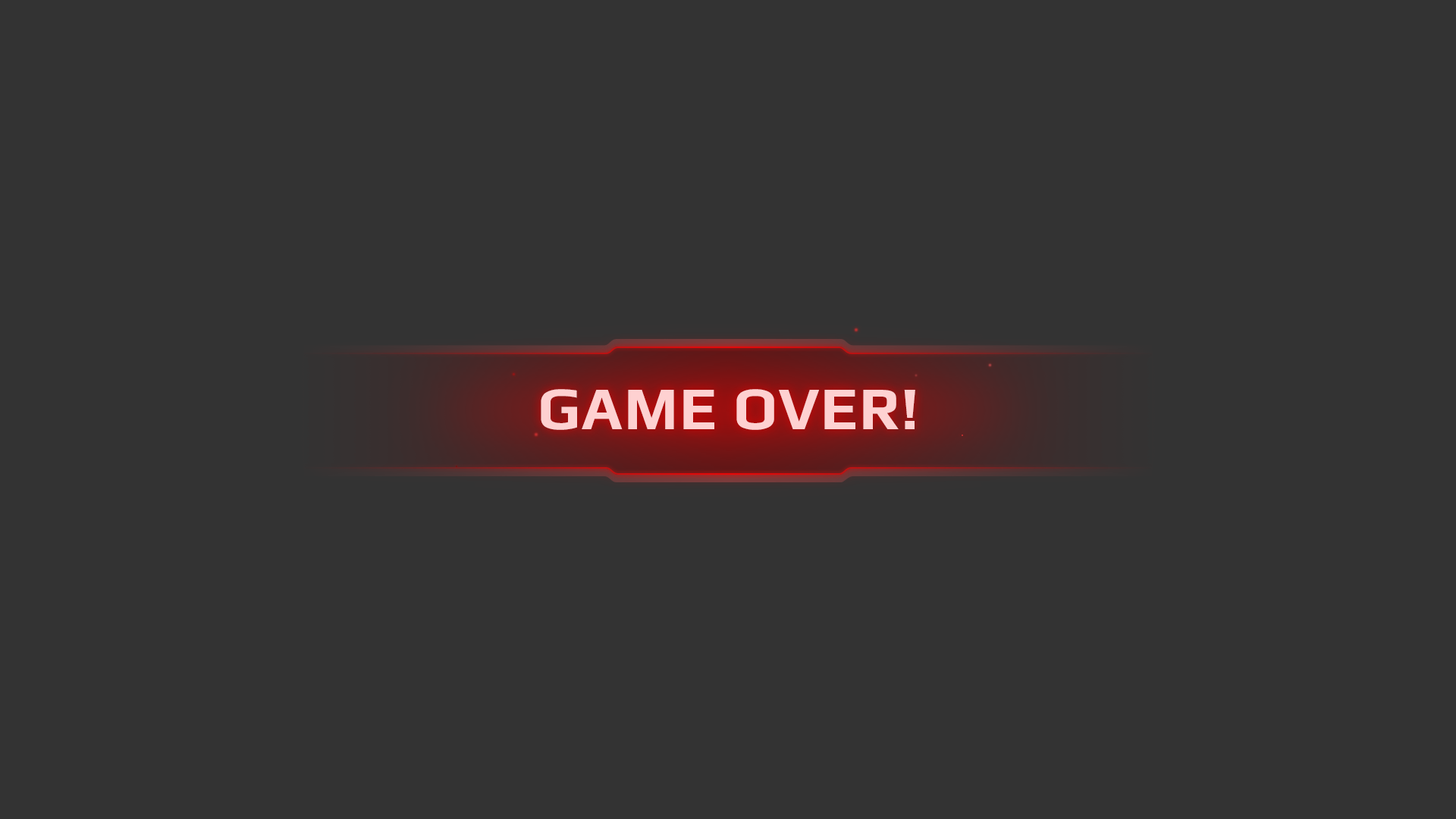
<style>
.page{position:relative;width:1456px;height:819px;background:#333333}
.page>*{position:absolute;margin:0}
.t1{font:60.7px "Play-Bold";letter-spacing:0.025em;color:#fed1d1}
</style>
<div class="page">
<p class="t1" style="left:541px;top:389px;width:374px;height:41px">GAME OVER!</p>
</div>
